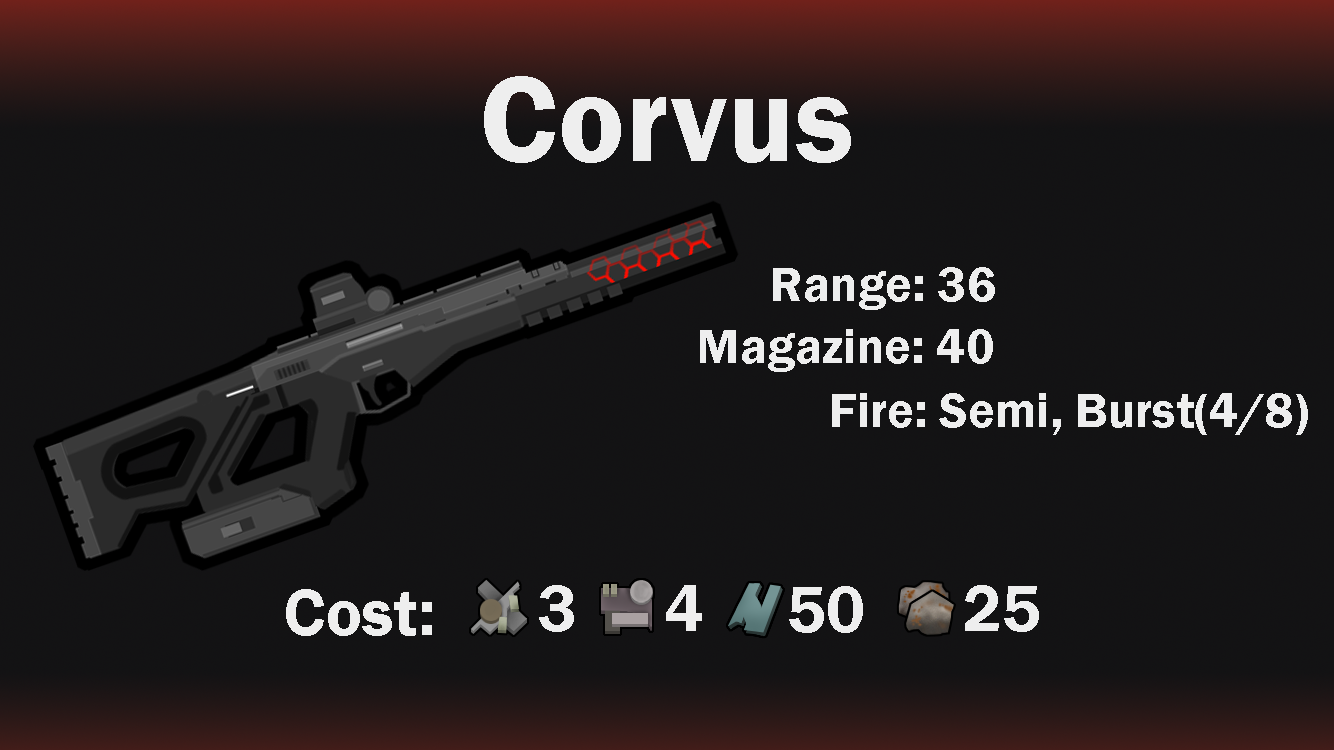
<style>
.page{position:relative;width:1334px;height:750px;background:#131314}
.page>*{position:absolute;margin:0}
.t1{font:125px "FranklinGothic-Demi";color:#eeeeee}
.t2{font:50px "FranklinGothic-Demi";color:#eeeeee}
.t3{font:66.7px "FranklinGothic-Demi";color:#eeeeee}
</style>
<div class="page">
<p class="t1" style="left:484px;top:76px;width:367px;height:87px">Corvus</p>
<p class="t2" style="left:773px;top:267px;width:222px;height:43px">Range: 36</p>
<p class="t2" style="left:700px;top:329px;width:293px;height:43px">Magazine: 40</p>
<p class="t2" style="left:832px;top:393px;width:476px;height:42px">Fire: Semi, Burst(4/8)</p>
<p class="t3" style="left:286px;top:589px;width:146px;height:47px">Cost:</p>
<p class="t3" style="left:539px;top:585px;width:35px;height:47px">3</p>
<p class="t3" style="left:666px;top:585px;width:36px;height:46px">4</p>
<p class="t3" style="left:789px;top:586px;width:74px;height:47px">50</p>
<p class="t3" style="left:965px;top:585px;width:74px;height:47px">25</p>
</div>
